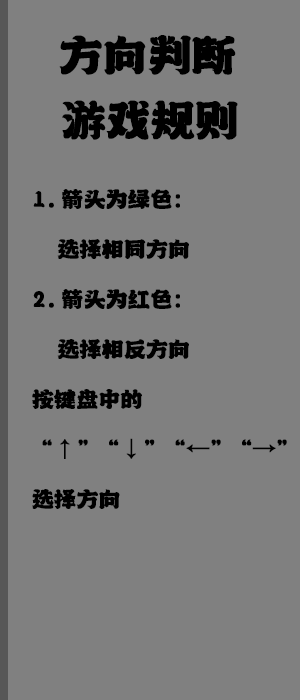
<style>
.page{position:relative;width:300px;height:700px;background:#808080}
.page>*{position:absolute;margin:0}
.t1{font:50px "-";letter-spacing:-0.02em;color:#000000;font-weight:bold}
.t2{font:25px/50px "-";letter-spacing:-0.02em;color:#000000;font-weight:bold}
</style>
<div class="page">
<p class="t1" style="left:59px;top:35px;width:177px;height:40px">方向判断</p>
<p class="t1" style="left:62px;top:100px;width:176px;height:40px">游戏规则</p>
<p class="t2" style="left:32px;top:189px;width:255px;height:320px">1.箭头为绿色：<br>  选择相同方向<br>2.箭头为红色：<br>  选择相反方向<br>按键盘中的<br>“↑”“↓”“←”“→”<br>选择方向</p>
</div>
